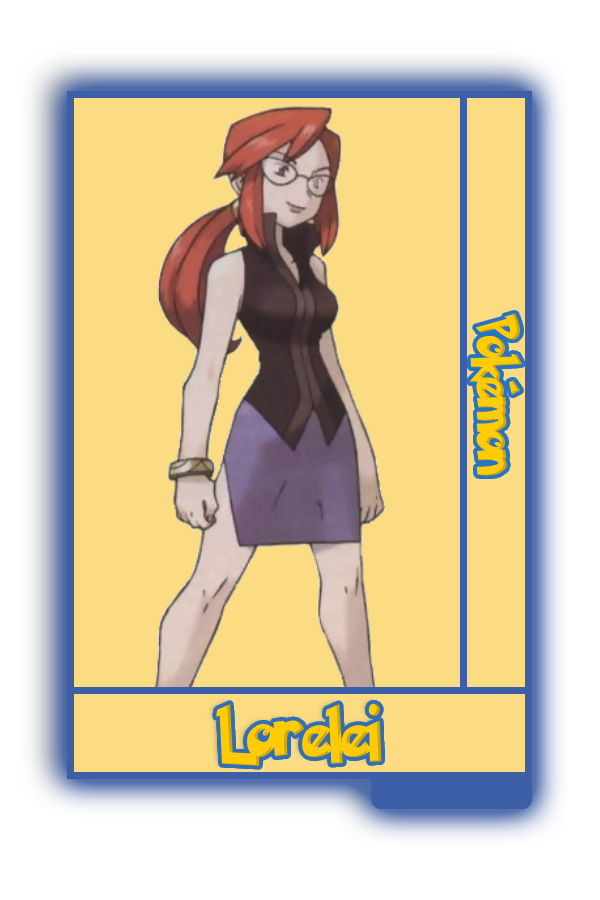
<style>
.page{position:relative;width:600px;height:900px;background:#fbdc83}
.page>*{position:absolute;margin:0}
.t1{font:48.8px "PokemonSolidNormal";color:#ffcb05;scale:0.8 1}
.t2{font:56.6px "PokemonSolidNormal";color:#ffcb05;scale:0.92 1}
</style>
<div class="page">
<p class="t1" style="left:469px;top:313px;width:54px;height:163px;rotate:90deg">Pokémon</p>
<p class="t2" style="left:216px;top:703px;width:166px;height:63px">Lorelei</p>
</div>
